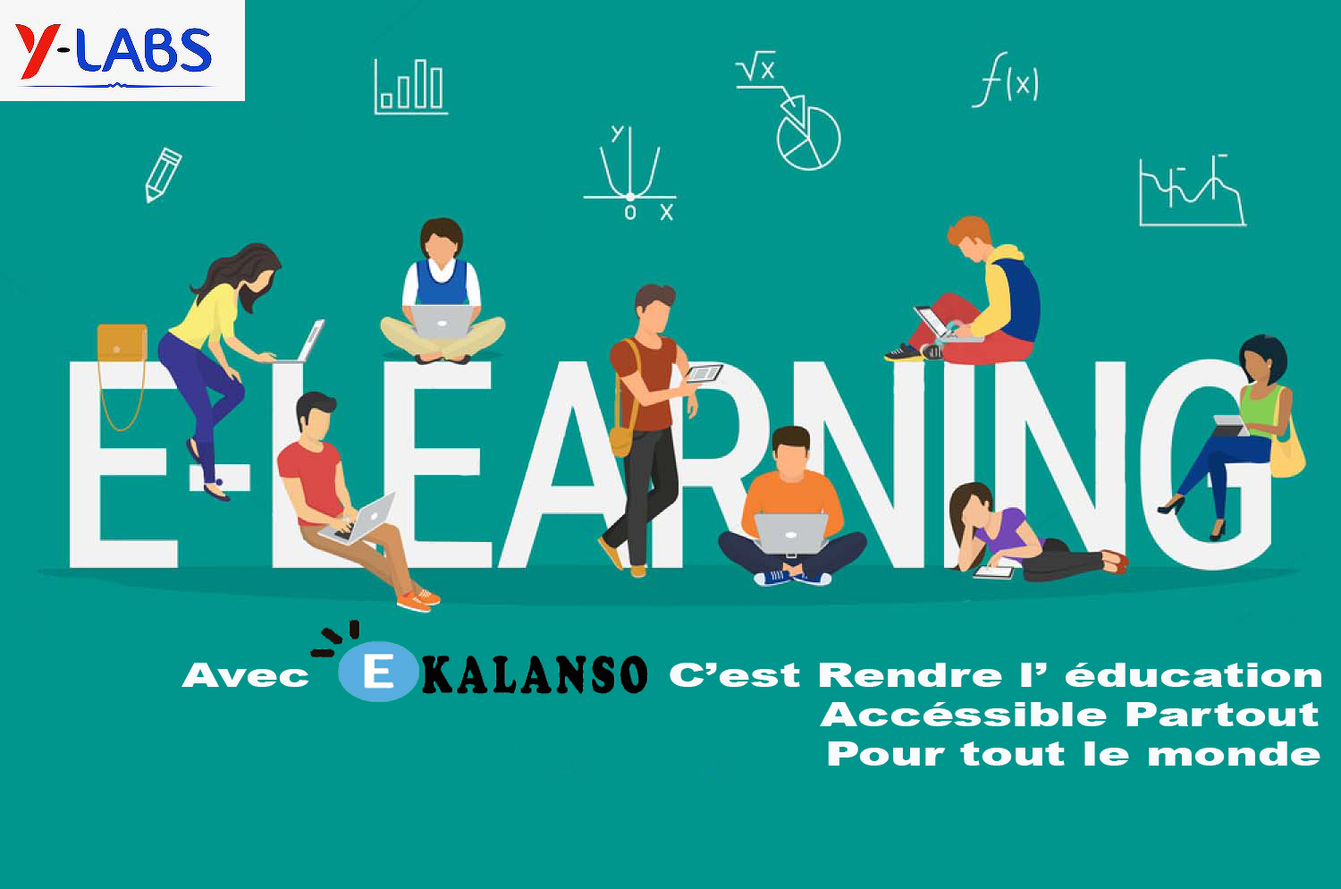
<style>
.page{position:relative;width:1341px;height:889px;background:#00968d}
.page>*{position:absolute;margin:0}
.t1{font:33.3px "Arial-Black";color:#f8fafb;scale:1.44 1}
</style>
<div class="page">
<p class="t1" style="left:182px;top:663px;width:127px;height:24px">Avec</p>
<p class="t1" style="left:670px;top:663px;width:652px;height:24px">C’est Rendre l’ éducation</p>
<p class="t1" style="left:820px;top:702px;width:499px;height:24px">Accéssible Partout</p>
<p class="t1" style="left:828px;top:741px;width:493px;height:25px">Pour tout le monde</p>
</div>
